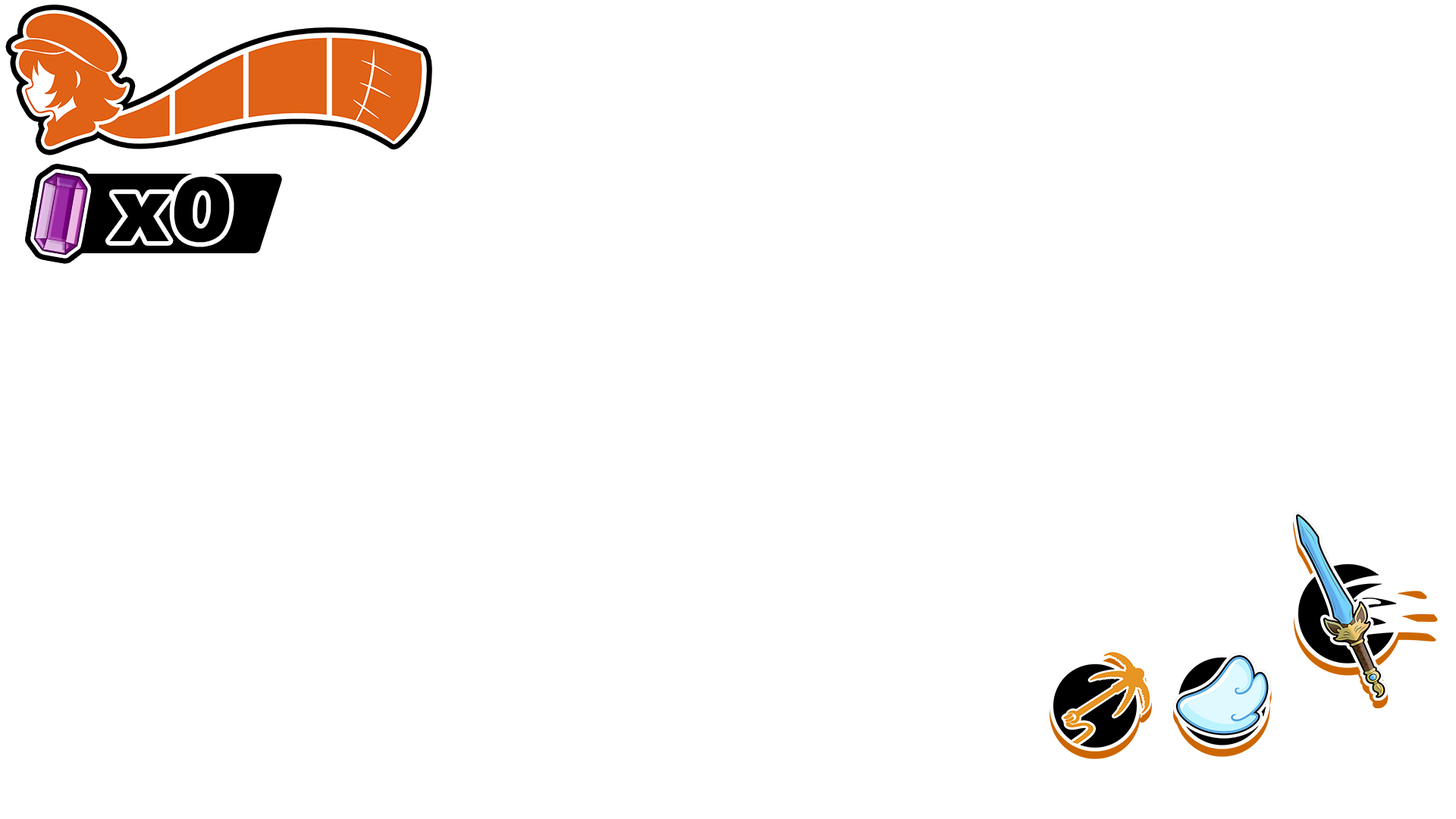
<style>
.page{position:relative;width:1456px;height:819px;background:#ffffff}
.page>*{position:absolute;margin:0}
.t1{font:94.8px "ErasITC-Bold";color:#000000}
</style>
<div class="page">
<p class="t1" style="left:109px;top:177px;width:121px;height:66px">x0</p>
</div>
